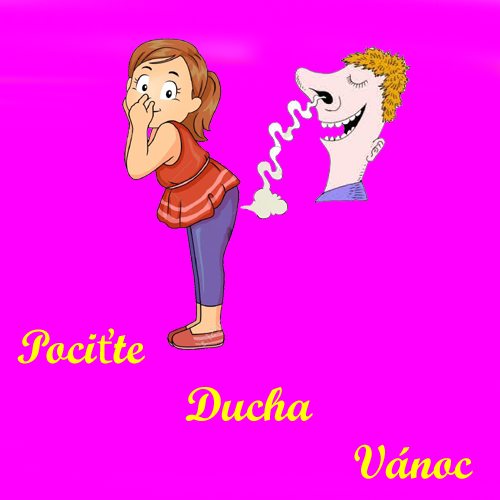
<style>
.page{position:relative;width:500px;height:500px;background:#ff00ff}
.page>*{position:absolute;margin:0}
.t1{font:48px "ScriptMTBold";color:#ffff00}
.t2{font:48px "Constantia";color:#ffff00}
</style>
<div class="page">
<p class="t1" style="left:17px;top:328px;width:456px;height:151px">Poci<span class="t2">ť</span>te<br>              Ducha<br>                            Vánoc</p>
</div>
